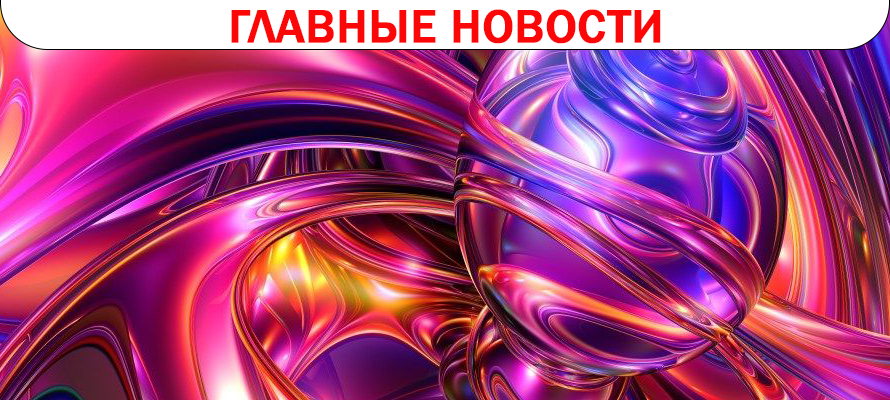
<style>
.page{position:relative;width:890px;height:400px}
.page>*{position:absolute;margin:0}
.t1{font:48px "FranklinGothic-Medium";color:#fc0707;text-transform:uppercase;font-weight:bold}
</style>
<div class="page">
<p class="t1" style="left:231px;top:9px;width:430px;height:35px">ГЛАВНЫЕ НОВОСТИ</p>
</div>
